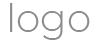
<style>
.page{position:relative;width:100px;height:40px;background:#ffffff}
.page>*{position:absolute;margin:0}
.t1{font:38.9px "Montserrat-Light";color:#8c8c8c}
</style>
<div class="page">
<p class="t1" style="left:10px;top:3px;width:80px;height:37px">logo</p>
</div>
